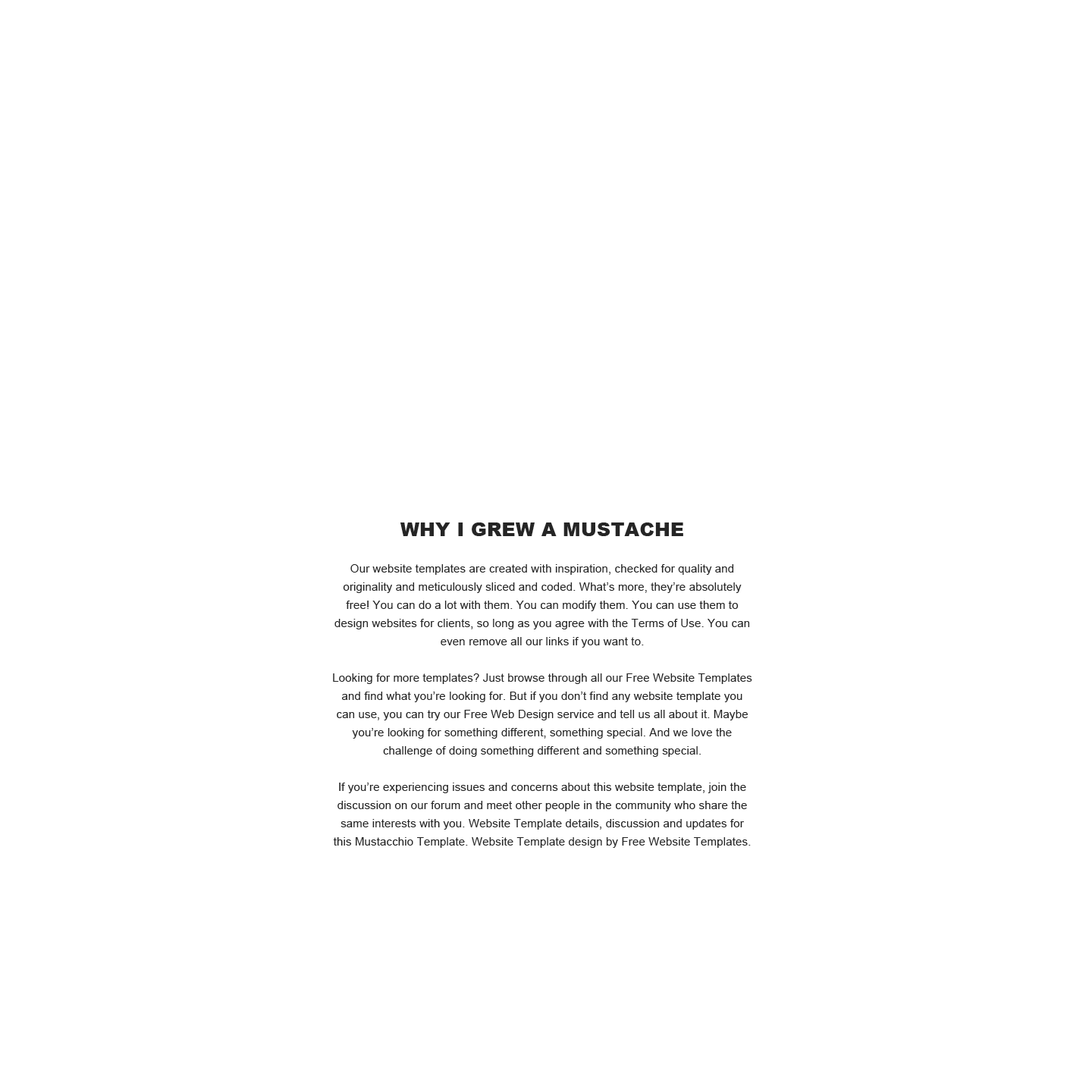
<style>
.page{position:relative;width:1092px;height:1092px;background:#ffffff}
.page>*{position:absolute;margin:0}
.t1{font:11.4px/18.2px "ArialMT";letter-spacing:0.01em;color:#252525}
.t2{font:19px/18.2px "Arial-Black";letter-spacing:0.01em;color:#252525}
</style>
<div class="page">
<p class="t1" style="left:333px;top:522px;width:419px;height:326px;text-align:center"><span class="t2">WHY I GREW A MUSTACHE<br><br></span>Our website templates are created with inspiration, checked for quality and originality and meticulously sliced and coded. What’s more, they’re absolutely free! You can do a lot with them. You can modify them. You can use them to design websites for clients, so long as you agree with the Terms of Use. You can even remove all our links if you want to.<br><br>Looking for more templates? Just browse through all our Free Website Templates and find what you’re looking for. But if you don’t find any website template you can use, you can try our Free Web Design service and tell us all about it. Maybe you’re looking for something different, something special. And we love the challenge of doing something different and something special.<br><br>If you’re experiencing issues and concerns about this website template, join the discussion on our forum and meet other people in the community who share the same interests with you. Website Template details, discussion and updates for this Mustacchio Template. Website Template design by Free Website Templates.</p>
</div>
